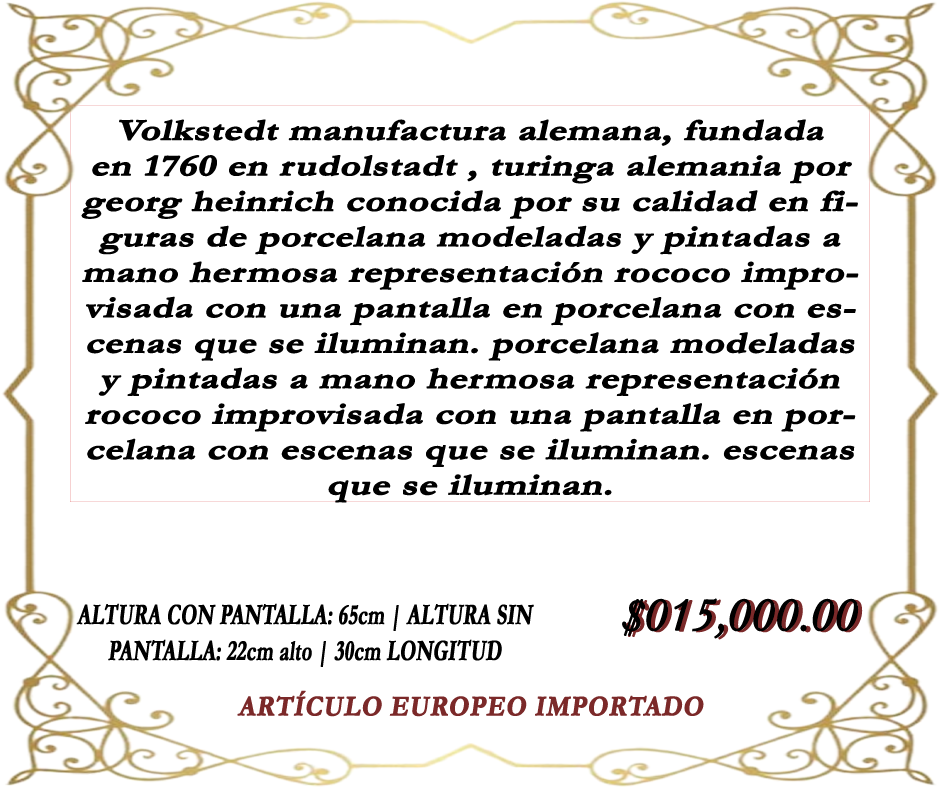
<style>
.page{position:relative;width:940px;height:788px;background:#ffffff}
.page>*{position:absolute;margin:0}
.t1{font:30.3px/35.5px "Garamond-Bold";color:#000000;font-weight:bold;font-style:italic;scale:1.27 1}
.t2{font:28.8px/36px "Garamond-Bold";color:#000000;font-weight:bold;font-style:italic;scale:0.69 1}
.t3{font:48px "Garamond-Italic";color:#000000;font-weight:bold}
.t4{font:48px "Garamond-Italic";color:#7b2929;font-weight:bold}
.t5{font:28.8px "Garamond-Bold";letter-spacing:0.025em;color:#7b2929;font-weight:bold;font-style:italic;scale:0.87 1}
</style>
<div class="page">
<p class="t1" style="left:81px;top:119px;width:778px;height:384px;text-align:center">Volkstedt manufactura alemana, fundada en 1760 en rudolstadt , turinga alemania por georg heinrich conocida por su calidad en figuras de porcelana modeladas y pintadas a mano hermosa representación rococo improvisada con una pantalla en porcelana con escenas que se iluminan. porcelana modeladas y pintadas a mano hermosa representación rococo improvisada con una pantalla en porcelana con escenas que se iluminan. escenas que se iluminan.</p>
<p class="t2" style="left:76px;top:603px;width:458px;height:64px;text-align:center">ALTURA CON PANTALLA: 65cm | ALTURA SIN PANTALLA: 22cm alto | 30cm LONGITUD</p>
<p class="t3" style="left:622px;top:598px;width:237px;height:41px">$015,000.00</p>
<p class="t4" style="left:626px;top:599px;width:237px;height:41px">$015,000.00</p>
<p class="t5" style="left:237px;top:690px;width:467px;height:27px">ARTÍCULO EUROPEO IMPORTADO</p>
</div>
